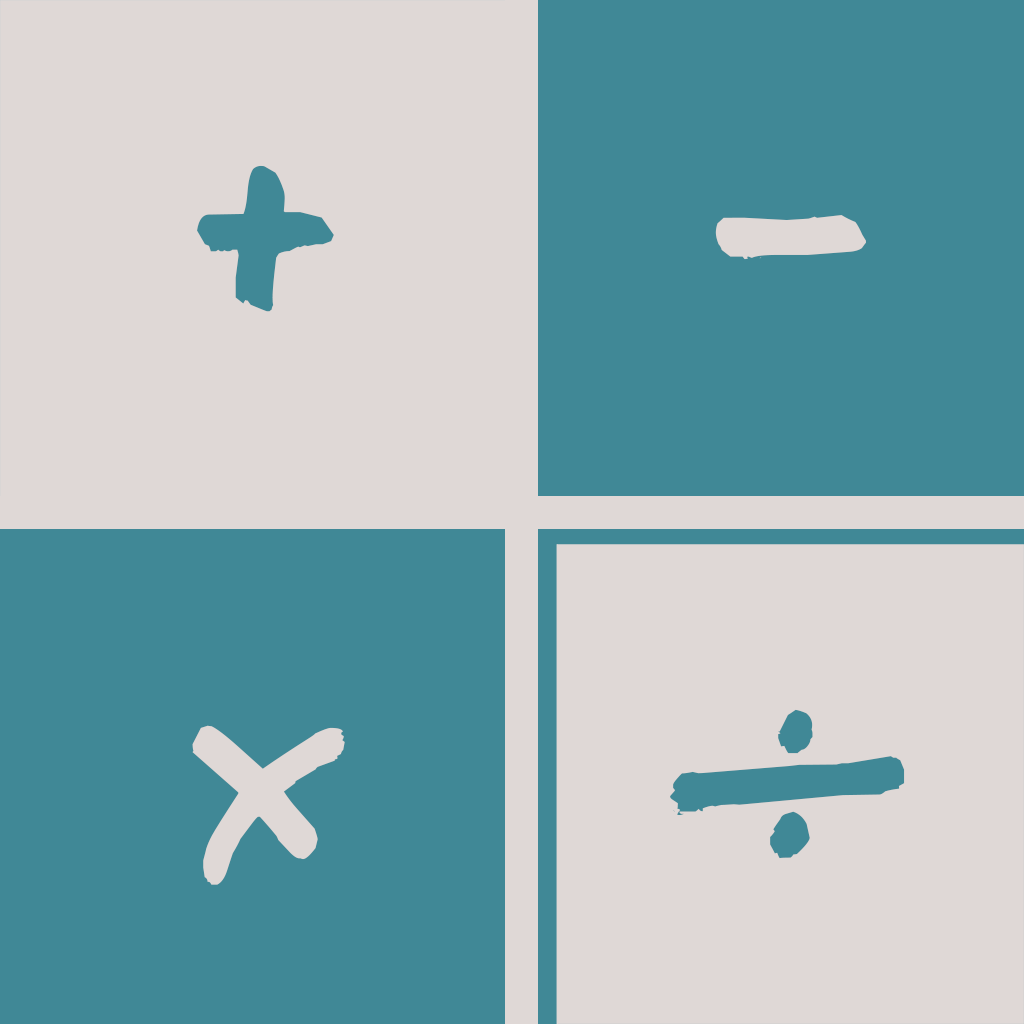
<style>
.page{position:relative;width:1024px;height:1024px;background:#dfd8d6}
.page>*{position:absolute;margin:0}
.t1{font:237px "DanielBlack";color:#408896}
.t2{font:237px "DanielBlack";color:#dfd8d6}
.t3{font:189.6px "DanielBlack";color:#dfd8d6}
</style>
<div class="page">
<p class="t1" style="left:197px;top:165px;width:137px;height:147px">+</p>
<p class="t2" style="left:715px;top:215px;width:151px;height:45px">-</p>
<p class="t1" style="left:670px;top:709px;width:235px;height:150px">÷</p>
<p class="t3" style="left:192px;top:725px;width:153px;height:160px">X</p>
</div>
